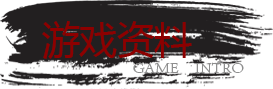
<style>
.page{position:relative;width:273px;height:89px;background:#221f20}
.page>*{position:absolute;margin:0}
.t1{font:38px "MicrosoftYaHei";letter-spacing:-0.013em;color:#8d0000}
.t2{font:16px "AdobeSongStd-Light";color:#8e8e8e}
</style>
<div class="page">
<p class="t1" style="left:42px;top:21px;width:150px;height:38px">游戏资料</p>
<p class="t2" style="left:133px;top:62px;width:111px;height:11px">GAME INTRO</p>
</div>
